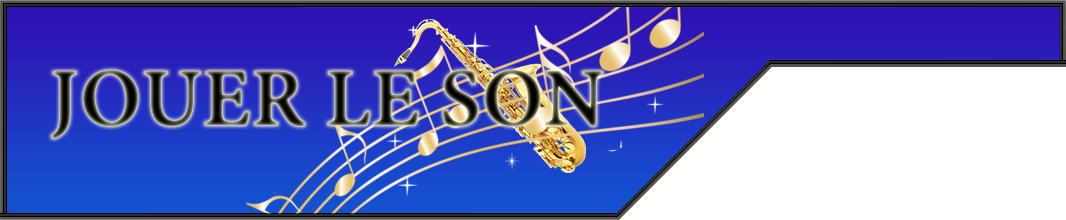
<style>
.page{position:relative;width:1066px;height:220px;background:#ffffff}
.page>*{position:absolute;margin:0}
.t1{font:90px "AdobeDevanagari-Bold";font-weight:bold}
</style>
<div class="page">
<p class="t1" style="left:50px;top:70px;width:554px;height:69px">JOUER LE SON</p>
</div>
